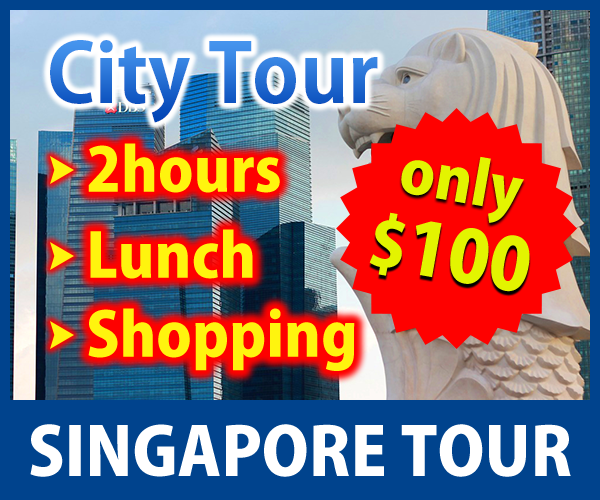
<style>
.page{position:relative;width:600px;height:500px}
.page>*{position:absolute;margin:0}
.t1{font:80px "KozGoPr6N-Bold"}
.t2{font:60px "KozGoPro-Heavy";color:#fff40e}
.t3{font:60px "KozGoPro-Heavy";color:#e3f400}
.t4{font:72px "KozGoPro-Heavy";color:#e3f400}
.t5{font:66px "KozGoPro-Heavy";color:#e3f400}
.t6{font:66px "KozGoPro-Heavy";color:#ffffff}
</style>
<div class="page">
<p class="t1" style="left:50px;top:40px;width:328px;height:83px">City Tour</p>
<p class="t2" style="left:88px;top:143px;width:192px;height:50px">2hours</p>
<p class="t3" style="left:401px;top:156px;width:123px;height:67px;rotate:10deg">only</p>
<p class="t4" style="left:369px;top:212px;width:161px;height:80px;rotate:10deg"><span class="t5">$</span>100</p>
<p class="t2" style="left:90px;top:229px;width:163px;height:50px">Lunch</p>
<p class="t2" style="left:88px;top:308px;width:267px;height:63px">Shopping</p>
<p class="t6" style="left:30px;top:424px;width:541px;height:53px">SINGAPORE TOUR</p>
</div>
